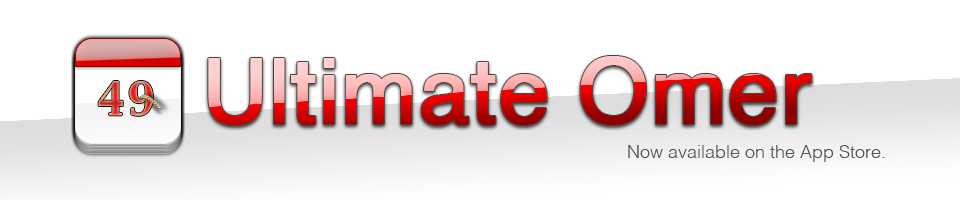
<style>
.page{position:relative;width:960px;height:200px;background:#ffffff}
.page>*{position:absolute;margin:0}
.t1{font:90px "Helvetica";font-weight:bold}
.t2{font:40px "CapitalsRegular";letter-spacing:0.07em;font-variant:small-caps}
.t3{font:18px "Helvetica-Light";color:#555555}
</style>
<div class="page">
<p class="t1" style="left:208px;top:56px;width:604px;height:69px">Ultimate Omer</p>
<p class="t2" style="left:98px;top:81px;width:55px;height:35px">49</p>
<p class="t3" style="left:628px;top:145px;width:257px;height:17px">Now available on the App Store.</p>
</div>
